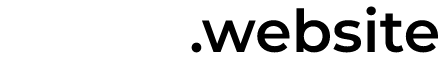
<style>
.page{position:relative;width:444px;height:70px;background:#ffffff}
.page>*{position:absolute;margin:0}
.t1{font:59px "Montserrat-SemiBold";color:#000000}
.t2{font:59px "Montserrat-SemiBold";color:#ffffff}
</style>
<div class="page">
<p class="t1" style="left:5px;top:6px;width:434px;height:58px"><span class="t2">disgin</span>.website</p>
</div>
